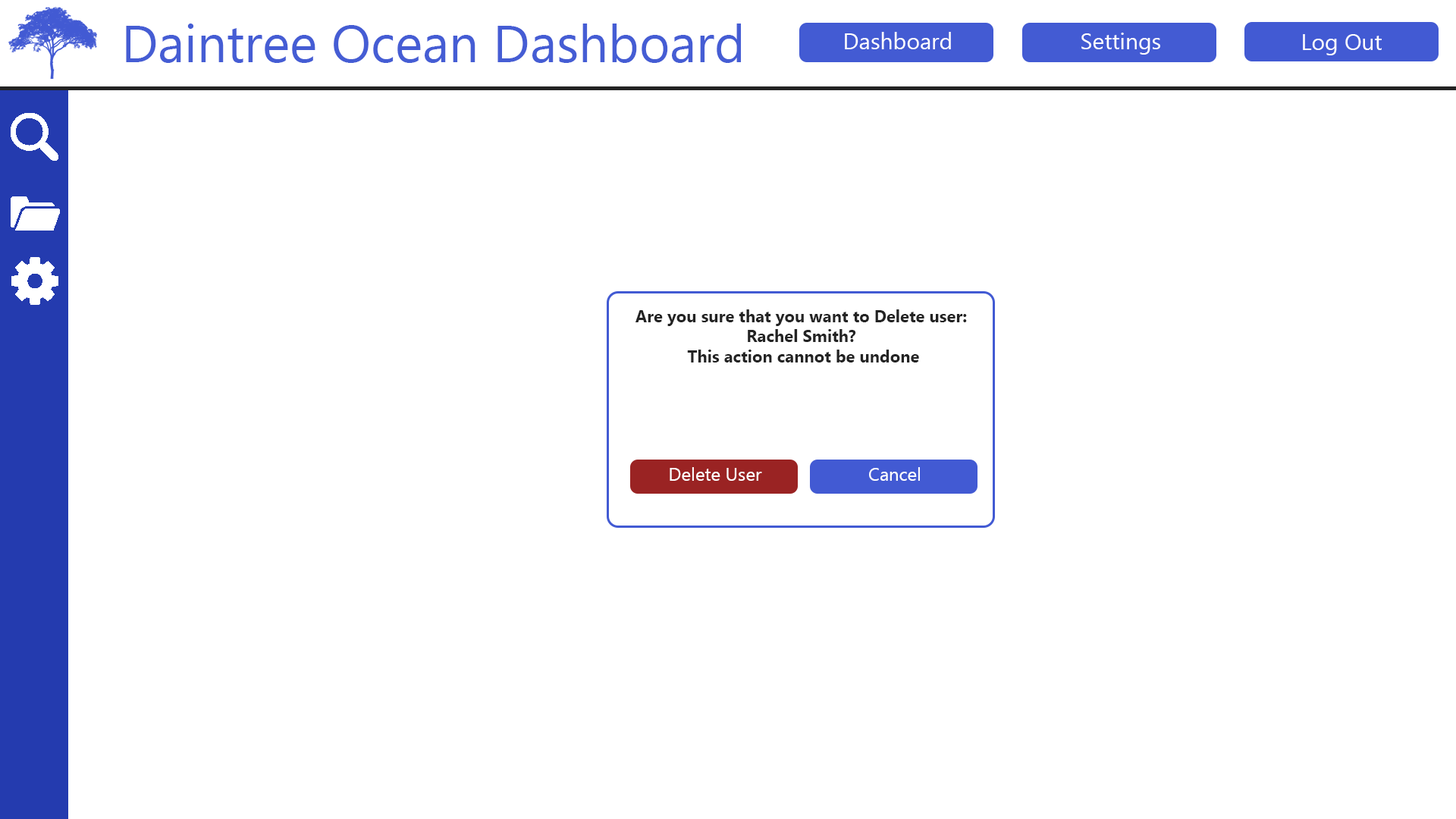
<style>
.page{position:relative;width:1456px;height:819px;background:#ffffff}
.page>*{position:absolute;margin:0}
.t1{font:52.3px "MyanmarText";color:#455dd4}
.t2{font:22.7px "MyanmarText";color:#ffffff}
.t3{font:16.7px "MyanmarText-Bold";color:#232323}
.t4{font:18.2px "MyanmarText";color:#ffffff}
</style>
<div class="page">
<p class="t1" style="left:126px;top:24px;width:615px;height:39px">Daintree Ocean Dashboard</p>
<p class="t2" style="left:845px;top:32px;width:106px;height:17px">Dashboard</p>
<p class="t2" style="left:1081px;top:33px;width:79px;height:22px">Settings</p>
<p class="t2" style="left:1303px;top:34px;width:79px;height:21px">Log Out</p>
<p class="t3" style="left:635px;top:309px;width:332px;height:53px;text-align:center">Are you sure that you want to Delete user: <br>Rachel Smith? <br>This action cannot be undone</p>
<p class="t4" style="left:670px;top:467px;width:92px;height:14px">Delete User</p>
<p class="t4" style="left:869px;top:467px;width:51px;height:14px">Cancel</p>
</div>
